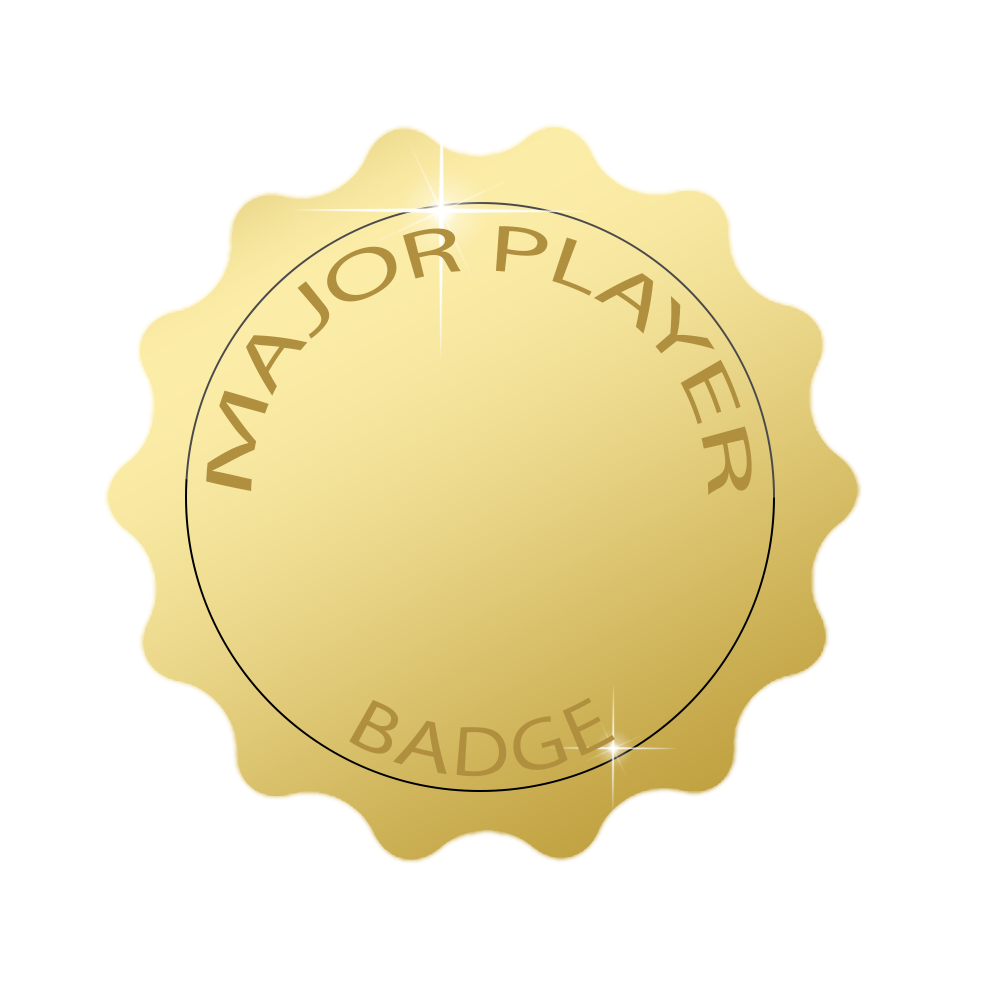
<style>
.page{position:relative;width:1000px;height:1000px;background:#ffffff}
.page>*{position:absolute;margin:0}
.t1{font:67px "MyriadPro-Regular";color:#b0903e}
.t2{font:72px "MyriadPro-Regular";color:#b0903e}
</style>
<div class="page">
<p class="t1" style="left:206px;top:226px;width:546px;height:270px">MAJOR PLAYER</p>
<p class="t2" style="left:349px;top:697px;width:266px;height:80px">BADGE</p>
</div>
